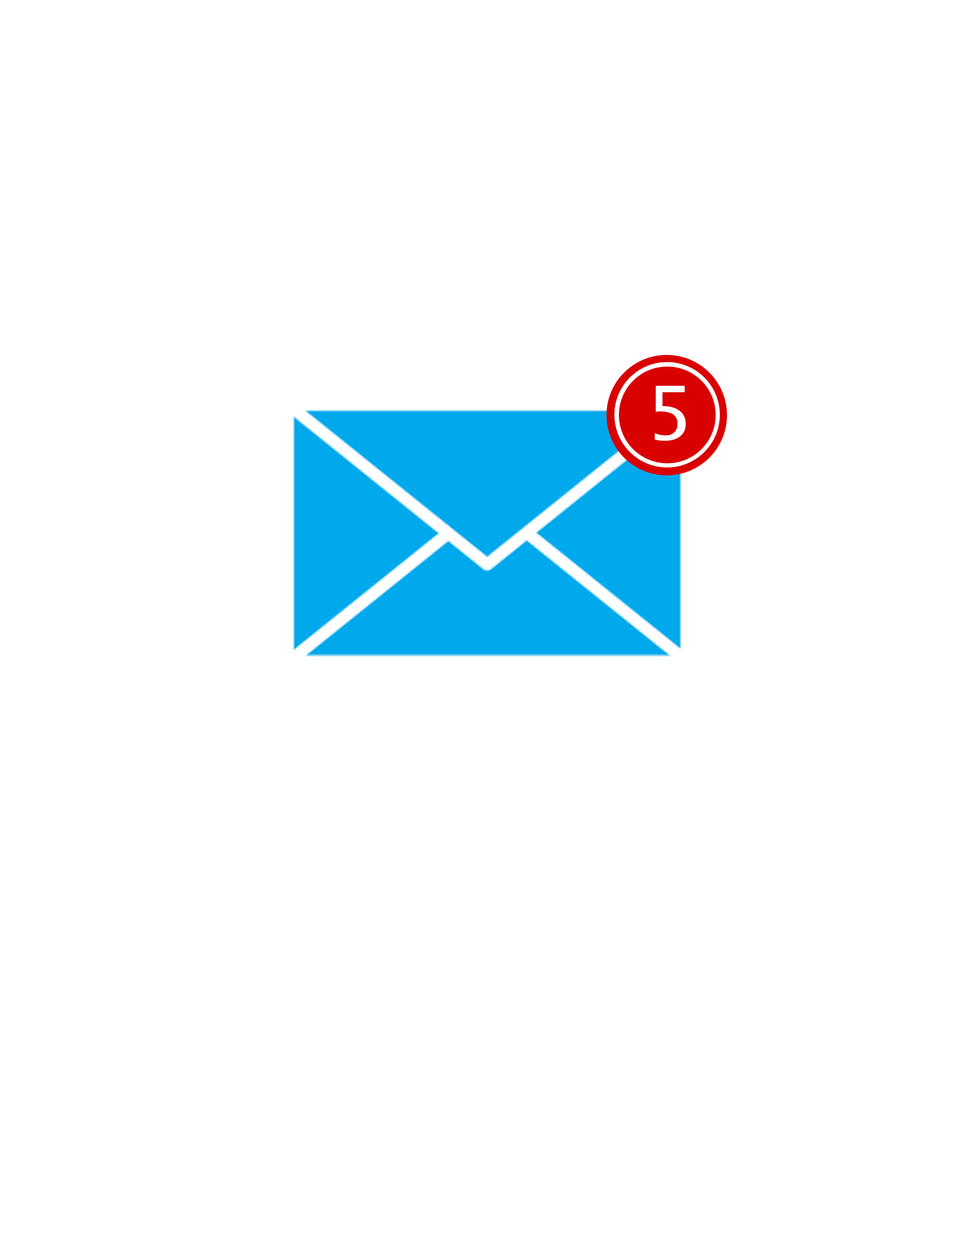
<style>
.page{position:relative;width:960px;height:1242px;background:#ffffff}
.page>*{position:absolute;margin:0}
.t1{font:73.7px "LucidaGrande";color:#ffffff;scale:1.07 1}
</style>
<div class="page">
<p class="t1" style="left:655px;top:386px;width:31px;height:55px">5</p>
</div>
